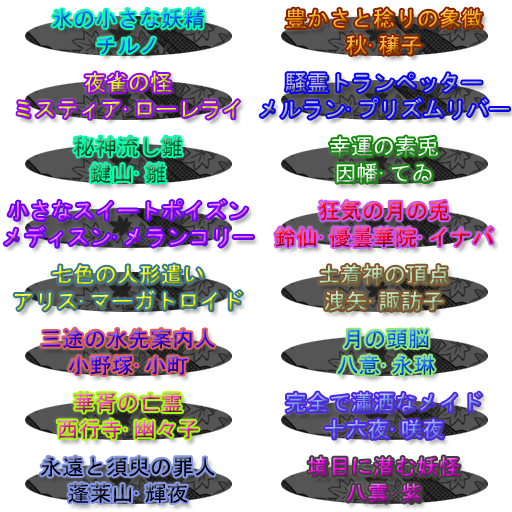
<style>
.page{position:relative;width:512px;height:512px;background:#ffffff}
.page>*{position:absolute;margin:0}
.t1{font:22px "MS-Gothic"}
</style>
<div class="page">
<p class="t1" style="left:52px;top:8px;width:152px;height:47px;text-align:center">氷の小さな妖精<br>チルノ</p>
<p class="t1" style="left:286px;top:8px;width:196px;height:47px;text-align:center">豊かさと稔りの象徴<br>秋·穣子</p>
<p class="t1" style="left:17px;top:72px;width:223px;height:47px;text-align:center">夜雀の怪<br>ミスティア·ローレライ</p>
<p class="t1" style="left:330px;top:136px;width:108px;height:47px;text-align:center">幸運の素兎<br>因幡·てゐ</p>
<p class="t1" style="left:4px;top:200px;width:249px;height:47px;text-align:center">小さなスイートポイズン<br>メディスン·メランコリー</p>
<p class="t1" style="left:275px;top:200px;width:219px;height:48px;text-align:center">狂気の月の兎<br>鈴仙·優曇華院·イナバ</p>
<p class="t1" style="left:14px;top:264px;width:229px;height:47px;text-align:center">七色の人形遣い<br>アリス·マーガトロイド</p>
<p class="t1" style="left:319px;top:264px;width:130px;height:47px;text-align:center">土着神の頂点<br>洩矢·諏訪子</p>
<p class="t1" style="left:41px;top:328px;width:174px;height:47px;text-align:center">三途の水先案内人<br>小野塚·小町</p>
<p class="t1" style="left:337px;top:329px;width:98px;height:46px;text-align:center">月の頭脳<br>八意·永琳</p>
<p class="t1" style="left:57px;top:392px;width:142px;height:47px;text-align:center">華胥の亡霊<br>西行寺·幽々子</p>
<p class="t1" style="left:40px;top:456px;width:175px;height:47px;text-align:center">永遠と須臾の罪人<br>蓬莱山·輝夜</p>
<p class="t1" style="left:308px;top:456px;width:152px;height:47px;text-align:center">境目に潜む妖怪<br>八雲·紫</p>
</div>
